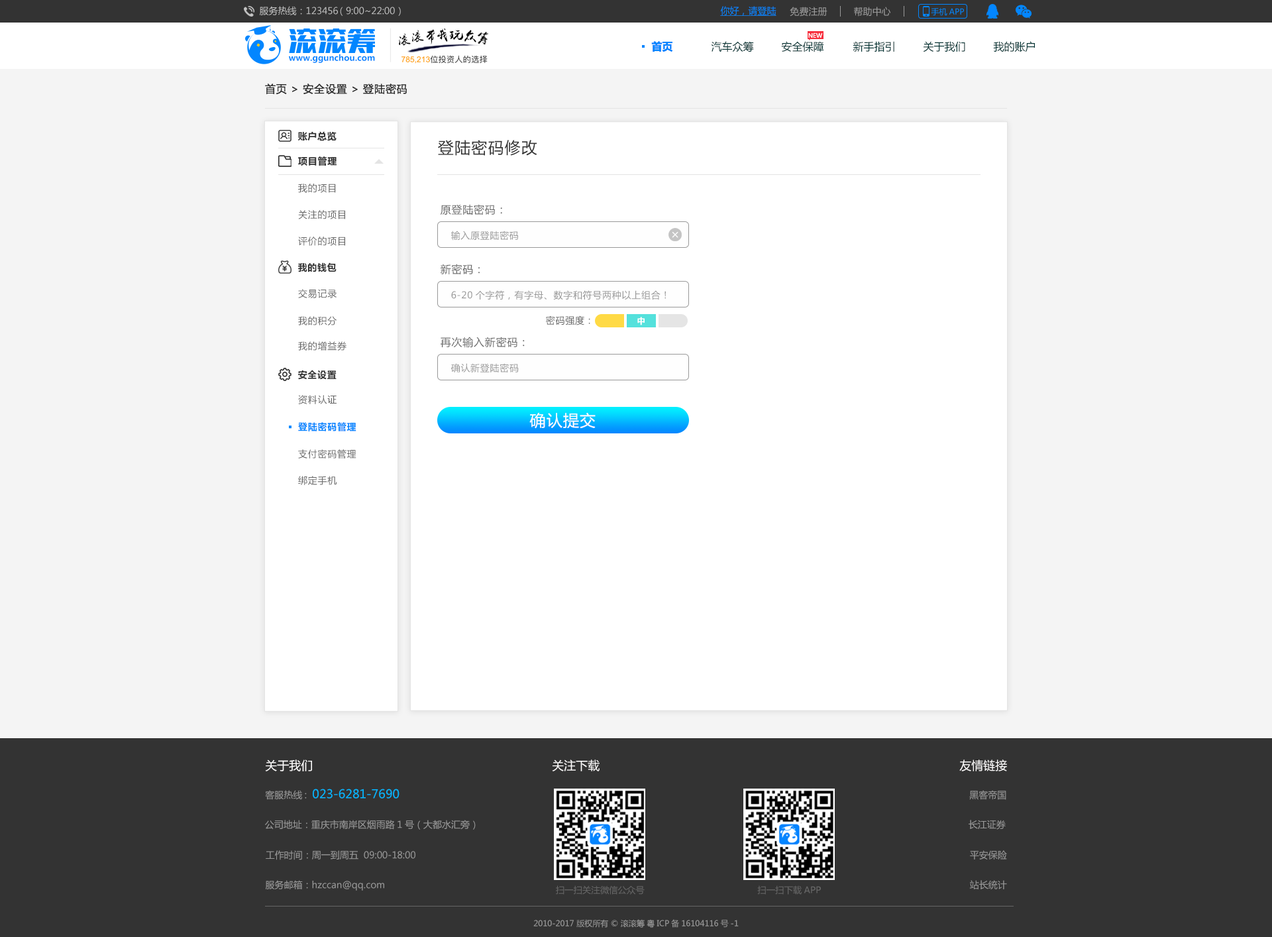
<style>
.page{position:relative;width:1272px;height:937px;background:#ffffff}
.page>*{position:absolute;margin:0}
.t1{font:9.3px "MicrosoftYaHei";color:#c4c4c4}
.t2{font:9.3px "MicrosoftYaHei";color:#0386ff;text-decoration:underline}
.t3{font:9.3px "MicrosoftYaHei";color:#999999}
.t4{font:8px "MicrosoftYaHei";color:#0386ff}
.t5{font:10.6px "MicrosoftYaHei-Bold";color:#0386ff}
.t6{font:10.6px "MicrosoftYaHei";color:#033333}
.t7{font:6px "MicrosoftYaHei";color:#ffffff}
.t8{font:8.3px "MicrosoftYaHei-Bold";color:#0386ff}
.t9{font:10.6px "MicrosoftYaHei";letter-spacing:0.05em;color:#333333}
.t10{font:9.3px "MicrosoftYaHei-Bold";letter-spacing:0.05em;color:#333333}
.t11{font:15.9px "MicrosoftYaHei";letter-spacing:0.05em;color:#333333}
.t12{font:9.3px "MicrosoftYaHei";letter-spacing:0.05em;color:#666666}
.t13{font:10.6px "MicrosoftYaHei";letter-spacing:0.05em;color:#666666}
.t14{font:9.3px "MicrosoftYaHei";letter-spacing:0.05em;color:#999999}
.t15{font:8px "MicrosoftYaHei-Bold";letter-spacing:0.05em;color:#ffffff}
.t16{font:15.9px "MicrosoftYaHei";letter-spacing:0.05em;color:#ffffff}
.t17{font:9.3px "MicrosoftYaHei-Bold";letter-spacing:0.05em;color:#0386ff}
.t18{font:11.9px "MicrosoftYaHei";color:#fffefe}
.t19{font:11.9px "MicrosoftYaHei";color:#03b6ff}
.t20{font:8.9px "MicrosoftYaHei";color:#666666}
.t21{font:8px "MicrosoftYaHei";color:#999999}
</style>
<div class="page">
<p class="t1" style="left:259px;top:6px;width:142px;height:10px">服务热线：123456 （9:00~22:00）</p>
<p class="t2" style="left:720px;top:6px;width:57px;height:10px">你好，请登陆</p>
<p class="t3" style="left:790px;top:7px;width:38px;height:10px">免费注册</p>
<p class="t3" style="left:854px;top:7px;width:37px;height:10px">帮助中心</p>
<p class="t4" style="left:931px;top:8px;width:33px;height:8px">手机APP</p>
<p class="t5" style="left:651px;top:41px;width:22px;height:11px">首页</p>
<p class="t6" style="left:711px;top:41px;width:43px;height:11px">汽车众筹</p>
<p class="t6" style="left:781px;top:41px;width:43px;height:11px">安全保障</p>
<p class="t7" style="left:809px;top:32px;width:14px;height:6px">NEW</p>
<p class="t6" style="left:853px;top:41px;width:42px;height:11px">新手指引</p>
<p class="t6" style="left:923px;top:41px;width:43px;height:11px">关于我们</p>
<p class="t6" style="left:993px;top:41px;width:42px;height:11px">我的账户</p>
<p class="t8" style="left:289px;top:54px;width:86px;height:9px">www.ggunchou.com</p>
<p class="t9" style="left:265px;top:84px;width:143px;height:11px">首页 &gt; 安全设置 &gt; 登陆密码</p>
<p class="t10" style="left:298px;top:131px;width:39px;height:10px">账户总览</p>
<p class="t11" style="left:438px;top:140px;width:99px;height:16px">登陆密码修改</p>
<p class="t10" style="left:298px;top:156px;width:39px;height:10px">项目管理</p>
<p class="t12" style="left:298px;top:184px;width:38px;height:9px">我的项目</p>
<p class="t13" style="left:441px;top:204px;width:61px;height:11px">原登陆密码：</p>
<p class="t12" style="left:298px;top:210px;width:47px;height:9px">关注的项目</p>
<p class="t14" style="left:451px;top:231px;width:67px;height:10px">输入原登陆密码</p>
<p class="t12" style="left:298px;top:237px;width:47px;height:9px">评价的项目</p>
<p class="t10" style="left:298px;top:262px;width:39px;height:10px">我的钱包</p>
<p class="t13" style="left:440px;top:264px;width:40px;height:10px">新密码：</p>
<p class="t12" style="left:298px;top:289px;width:39px;height:9px">交易记录</p>
<p class="t14" style="left:451px;top:290px;width:216px;height:10px">6-20个字符，有字母、数字和符号两种以上组合！</p>
<p class="t12" style="left:298px;top:316px;width:39px;height:9px">我的积分</p>
<p class="t12" style="left:546px;top:315px;width:44px;height:10px">密码强度：</p>
<p class="t15" style="left:638px;top:317px;width:7px;height:8px">中</p>
<p class="t12" style="left:298px;top:341px;width:49px;height:10px">我的增益券</p>
<p class="t13" style="left:441px;top:337px;width:84px;height:11px">再次输入新密码：</p>
<p class="t14" style="left:451px;top:363px;width:68px;height:10px">确认新登陆密码</p>
<p class="t10" style="left:298px;top:370px;width:39px;height:10px">安全设置</p>
<p class="t12" style="left:298px;top:395px;width:39px;height:9px">资料认证</p>
<p class="t16" style="left:530px;top:413px;width:66px;height:16px">确认提交</p>
<p class="t17" style="left:298px;top:422px;width:59px;height:9px">登陆密码管理</p>
<p class="t12" style="left:298px;top:449px;width:59px;height:10px">支付密码管理</p>
<p class="t12" style="left:298px;top:476px;width:39px;height:9px">绑定手机</p>
<p class="t18" style="left:265px;top:759px;width:47px;height:12px">关于我们</p>
<p class="t18" style="left:552px;top:759px;width:48px;height:12px">关注下载</p>
<p class="t18" style="left:960px;top:759px;width:47px;height:12px">友情链接</p>
<p class="t19" style="left:265px;top:789px;width:135px;height:11px"><span class="t3">客服热线:  </span>023-6281-7690</p>
<p class="t3" style="left:970px;top:790px;width:37px;height:10px">黑客帝国</p>
<p class="t3" style="left:265px;top:820px;width:211px;height:10px">公司地址：重庆市南岸区烟雨路1号（大都水汇旁）</p>
<p class="t3" style="left:969px;top:820px;width:37px;height:10px">长江证券</p>
<p class="t3" style="left:266px;top:850px;width:150px;height:10px">工作时间：周一到周五  09:00-18:00</p>
<p class="t3" style="left:970px;top:850px;width:37px;height:10px">平安保险</p>
<p class="t3" style="left:265px;top:880px;width:119px;height:11px">服务邮箱：hzccan@qq.com</p>
<p class="t3" style="left:970px;top:880px;width:37px;height:9px">站长统计</p>
<p class="t20" style="left:556px;top:885px;width:89px;height:10px">扫一扫关注微信公众号</p>
<p class="t20" style="left:758px;top:885px;width:63px;height:10px">扫一扫下载APP</p>
<p class="t21" style="left:534px;top:919px;width:205px;height:9px">2010-2017 版权所有 © 滚滚筹 粤ICP备16104116号-1</p>
</div>
